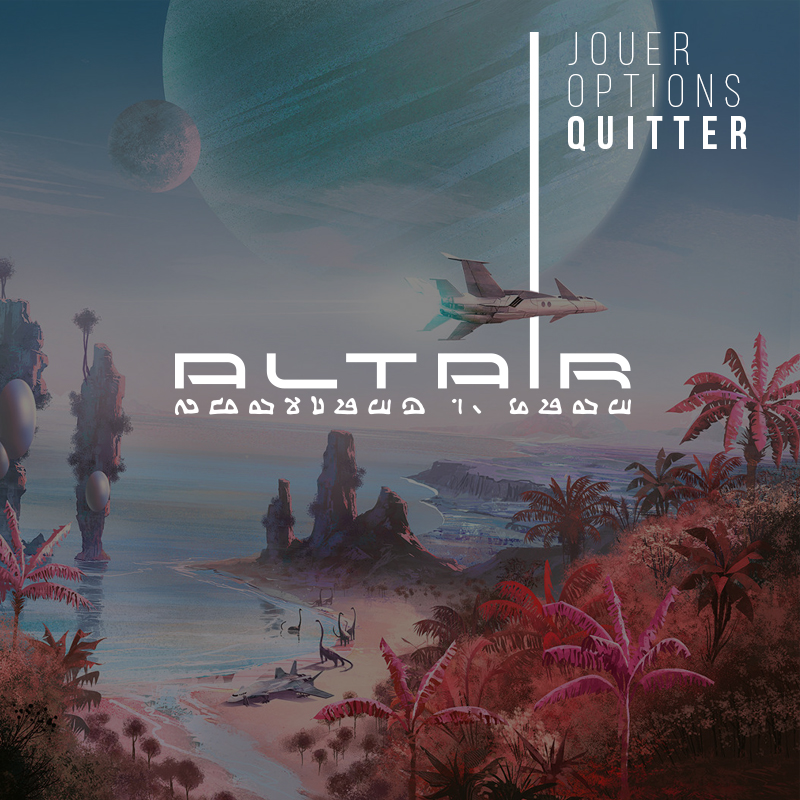
<style>
.page{position:relative;width:800px;height:800px}
.page>*{position:absolute;margin:0}
.t1{font:46.3px/42px "BebasNeueLight";letter-spacing:0.24em;color:#ffffff}
.t2{font:46.3px/42px "BebasNeue";letter-spacing:0.24em;color:#ffffff}
</style>
<div class="page">
<p class="t1" style="left:568px;top:32px;width:179px;height:119px">JOUER<br>options<br><span class="t2">quitter</span></p>
</div>
